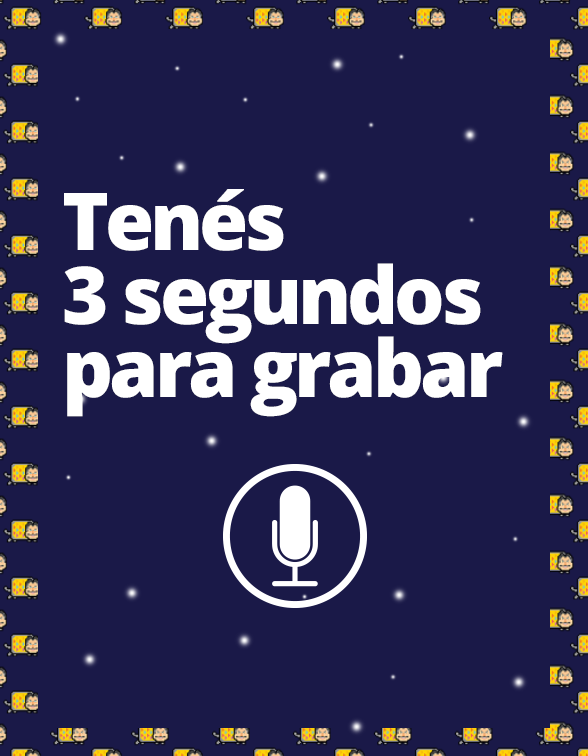
<style>
.page{position:relative;width:588px;height:756px;background:#1a1948}
.page>*{position:absolute;margin:0}
.t1{font:79.7px/73.4px "OpenSans-Extrabold";letter-spacing:-0.05em;color:#ffffff}
</style>
<div class="page">
<p class="t1" style="left:64px;top:189px;width:439px;height:228px">Tenés<br>3 segundos<br>para grabar</p>
</div>
